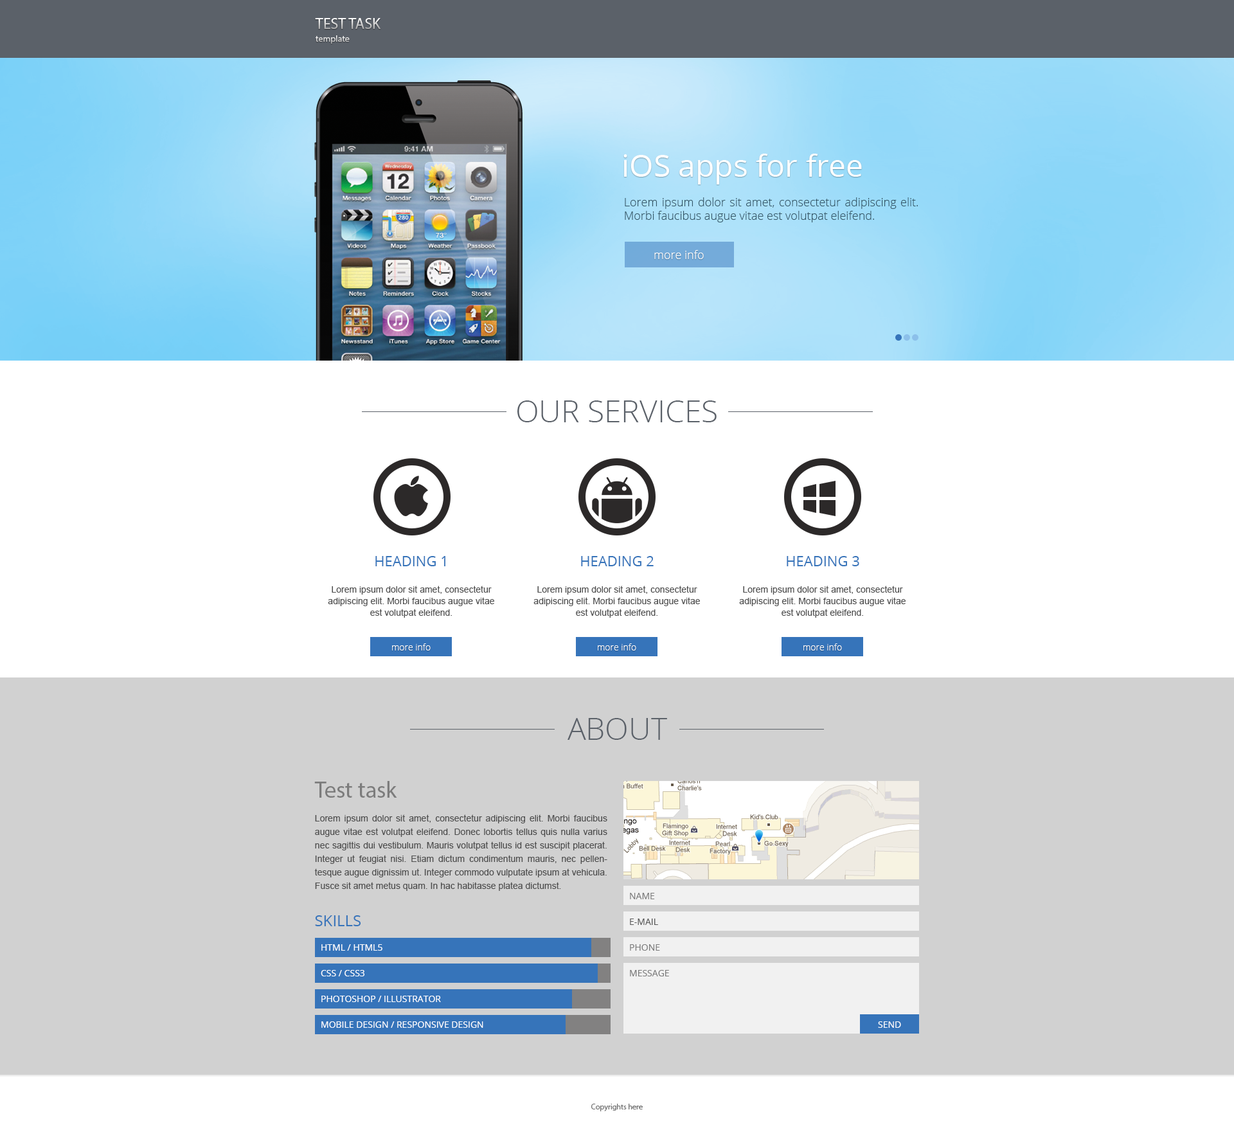
<style>
.page{position:relative;width:1234px;height:1139px;background:#ffffff}
.page>*{position:absolute;margin:0}
.t1{font:15.4px "MyriadPro-Regular"}
.t2{font:9px "MyriadPro-Regular"}
.t3{font:30.9px "OpenSans";color:#ffffff}
.t4{font:11.6px/13.5px "OpenSans-Light";color:#335565}
.t5{font:11.6px "OpenSans-Light";color:#ffffff}
.t6{font:30.9px "OpenSans-Light";color:#5b6169;text-transform:uppercase}
.t7{font:14.1px "OpenSans";color:#3674ba;text-transform:uppercase}
.t8{font:9px/11.6px "ArialMT";color:#4e4e4e}
.t9{font:9px "OpenSans-Light";color:#ffffff}
.t10{font:23.1px "MyriadPro-Regular";color:#7c7c7c}
.t11{font:9px/13.5px "ArialMT";color:#4e4e4e}
.t12{font:9px "OpenSans";color:#7b7b7b;text-transform:uppercase}
.t13{font:15.4px "OpenSans";color:#3674ba;text-transform:uppercase}
.t14{font:9px "OpenSans";color:#585858;text-transform:uppercase}
.t15{font:9px "OpenSans";color:#ffffff;text-transform:uppercase}
.t16{font:7.7px "MyriadPro-Regular";color:#6f6f6f}
</style>
<div class="page">
<p class="t1" style="left:315px;top:18px;width:66px;height:11px">TEST TASK</p>
<p class="t2" style="left:316px;top:35px;width:34px;height:9px">template</p>
<p class="t3" style="left:624px;top:154px;width:238px;height:30px">iOS apps for free</p>
<p class="t4" style="left:625px;top:197px;width:293px;height:25px;text-align:justify">Lorem ipsum dolor sit amet, consectetur adipiscing elit. Morbi faucibus augue vitae est volutpat eleifend.</p>
<p class="t5" style="left:654px;top:250px;width:50px;height:9px">more info</p>
<p class="t6" style="left:518px;top:401px;width:199px;height:21px">OUR SERVICES</p>
<p class="t7" style="left:375px;top:556px;width:71px;height:10px">Heading 1</p>
<p class="t7" style="left:581px;top:556px;width:73px;height:10px">Heading 2</p>
<p class="t7" style="left:787px;top:556px;width:73px;height:10px">Heading 3</p>
<p class="t8" style="left:328px;top:586px;width:166px;height:32px;text-align:center">Lorem ipsum dolor sit amet, consectetur adipiscing elit. Morbi faucibus augue vitae est volutpat eleifend.</p>
<p class="t8" style="left:534px;top:586px;width:166px;height:32px;text-align:center">Lorem ipsum dolor sit amet, consectetur adipiscing elit. Morbi faucibus augue vitae est volutpat eleifend.</p>
<p class="t8" style="left:739px;top:586px;width:167px;height:32px;text-align:center">Lorem ipsum dolor sit amet, consectetur adipiscing elit. Morbi faucibus augue vitae est volutpat eleifend.</p>
<p class="t9" style="left:392px;top:644px;width:39px;height:7px">more info</p>
<p class="t9" style="left:598px;top:644px;width:38px;height:7px">more info</p>
<p class="t9" style="left:804px;top:644px;width:38px;height:7px">more info</p>
<p class="t6" style="left:568px;top:718px;width:99px;height:22px">About</p>
<p class="t10" style="left:314px;top:781px;width:83px;height:17px">Test task</p>
<p class="t11" style="left:314px;top:815px;width:294px;height:76px;text-align:justify">Lorem ipsum dolor sit amet, consectetur adipiscing elit. Morbi faucibus augue vitae est volutpat eleifend. Donec lobortis tellus quis nulla varius nec sagittis dui vestibulum. Mauris volutpat tellus id est suscipit placerat. Integer ut feugiat nisi. Etiam dictum condimentum mauris, nec pellentesque augue dignissim ut. Integer commodo vulputate ipsum at vehicula. Fusce sit amet metus quam. In hac habitasse platea dictumst.</p>
<p class="t12" style="left:630px;top:893px;width:25px;height:6px">NAME</p>
<p class="t13" style="left:315px;top:915px;width:46px;height:11px">Skills</p>
<p class="t14" style="left:630px;top:919px;width:28px;height:6px">E-mail</p>
<p class="t15" style="left:321px;top:944px;width:61px;height:7px">HTML / HTML5</p>
<p class="t12" style="left:630px;top:944px;width:30px;height:7px">Phone</p>
<p class="t15" style="left:321px;top:970px;width:43px;height:7px">CSS / CSS3</p>
<p class="t12" style="left:630px;top:970px;width:39px;height:7px">MESSAGE</p>
<p class="t15" style="left:321px;top:996px;width:120px;height:6px">Photoshop / IlLustrator</p>
<p class="t15" style="left:321px;top:1022px;width:162px;height:6px">Mobile design / Responsive design</p>
<p class="t15" style="left:878px;top:1022px;width:23px;height:6px">SEND</p>
<p class="t16" style="left:591px;top:1104px;width:52px;height:8px">Copyrights here</p>
</div>
